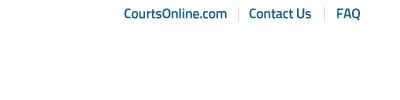
<style>
.page{position:relative;width:400px;height:100px;background:#ffffff}
.page>*{position:absolute;margin:0}
.t1{font:14px "TitilliumText22L-Bold";letter-spacing:-0.02em;color:#11638b}
</style>
<div class="page">
<p class="t1" style="left:124px;top:8px;width:103px;height:11px">CourtsOnline.com</p>
<p class="t1" style="left:249px;top:8px;width:62px;height:11px">Contact Us</p>
<p class="t1" style="left:337px;top:8px;width:23px;height:13px">FAQ</p>
</div>
